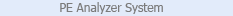
<style>
.page{position:relative;width:233px;height:16px;background:#e2ebfa}
.page>*{position:absolute;margin:0}
.t1{font:12px "Tahoma";color:#7b7b7b}
</style>
<div class="page">
<p class="t1" style="left:60px;top:2px;width:103px;height:12px">PE Analyzer System</p>
</div>
